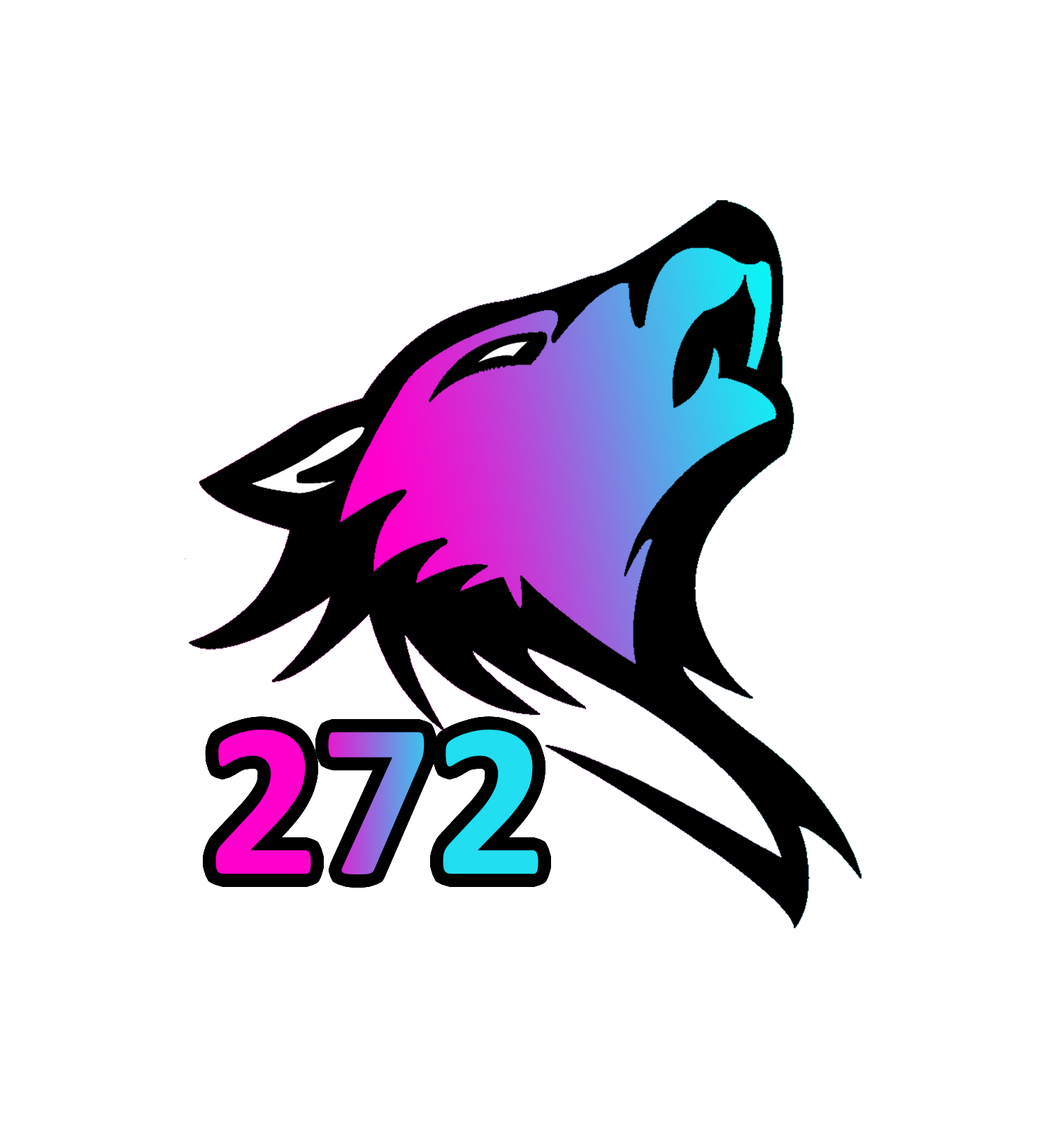
<style>
.page{position:relative;width:1049px;height:1136px;background:#ffffff}
.page>*{position:absolute;margin:0}
.t1{font:223.9px "Calibri-Bold"}
</style>
<div class="page">
<p class="t1" style="left:215px;top:730px;width:324px;height:145px">272</p>
</div>
